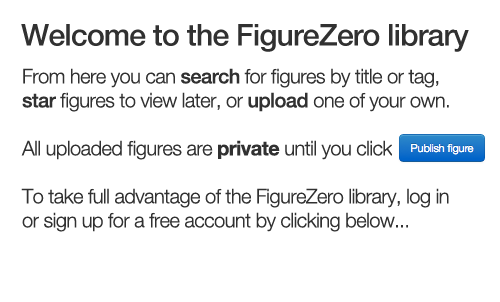
<style>
.page{position:relative;width:500px;height:302px;background:#ffffff}
.page>*{position:absolute;margin:0}
.t1{font:30px "HelveticaNeue-Medium";letter-spacing:-0.025em;color:#313131}
.t2{font:20px "HelveticaNeue-Light";letter-spacing:-0.025em;color:#313131}
.t3{font:20px "HelveticaNeue-Medium";letter-spacing:-0.025em;color:#313131}
.t4{font:20px "HelveticaNeue-Bold";letter-spacing:-0.025em;color:#313131}
</style>
<div class="page">
<p class="t1" style="left:21px;top:24px;width:448px;height:28px">Welcome to the FigureZero library</p>
<p class="t2" style="left:21px;top:68px;width:428px;height:164px">From here you can <span class="t3">search </span>for figures by title or tag, <span class="t3">star </span>figures to view later, or <span class="t3">upload </span>one of your own.<br><br>All uploaded figures are <span class="t4">private </span>until you click<br><br>To take full advantage of the FigureZero library, log in or sign up for a free account by clicking below...</p>
</div>
